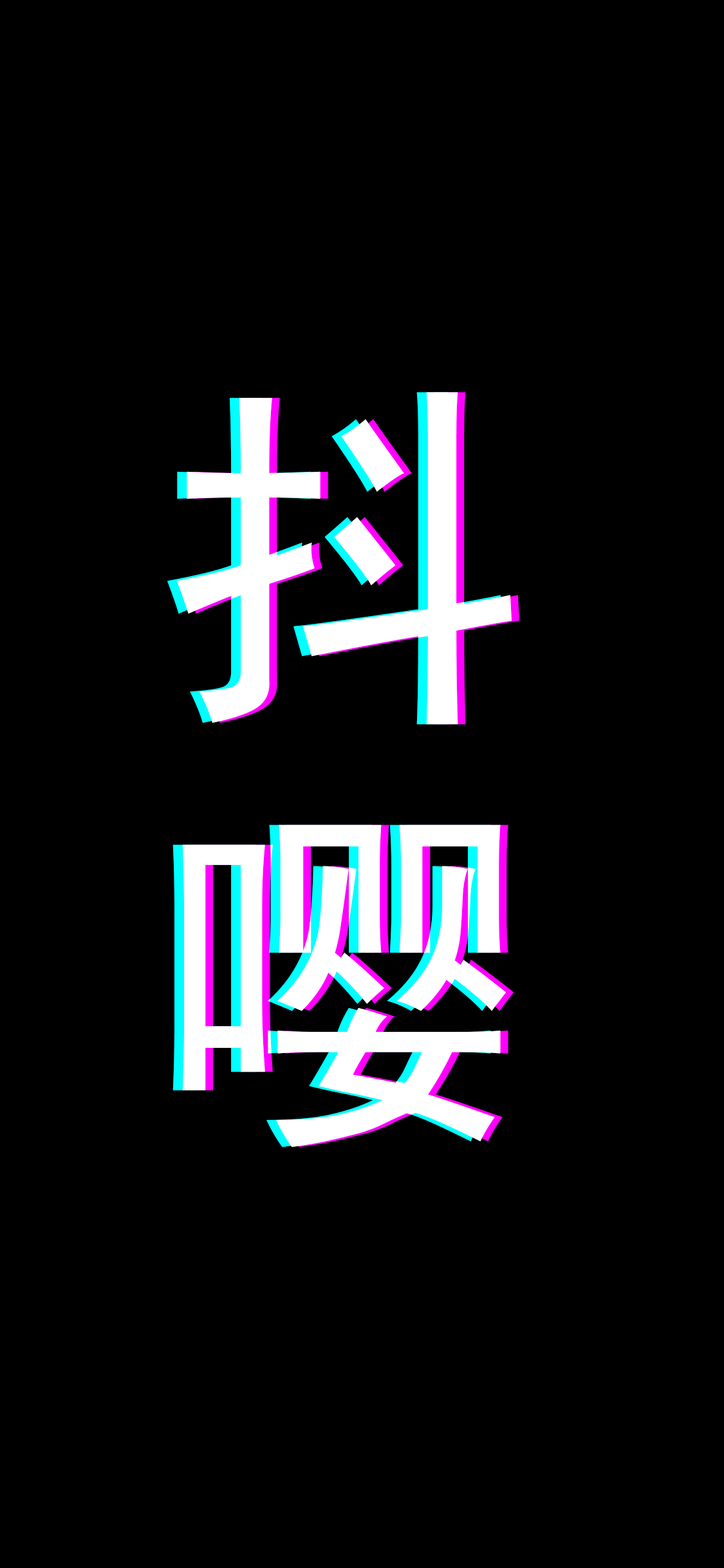
<style>
.page{position:relative;width:724px;height:1568px;background:#000000}
.page>*{position:absolute;margin:0}
.t1{font:362.8px/629.4px "SimHei";letter-spacing:0.18em;color:#ffffff}
</style>
<div class="page">
<p class="t1" style="left:167px;top:392px;width:335px;height:755px">抖嘤</p>
<p class="t1" style="left:177px;top:392px;width:335px;height:755px">抖嘤</p>
<p class="t1" style="left:185px;top:392px;width:334px;height:755px">抖嘤</p>
</div>
